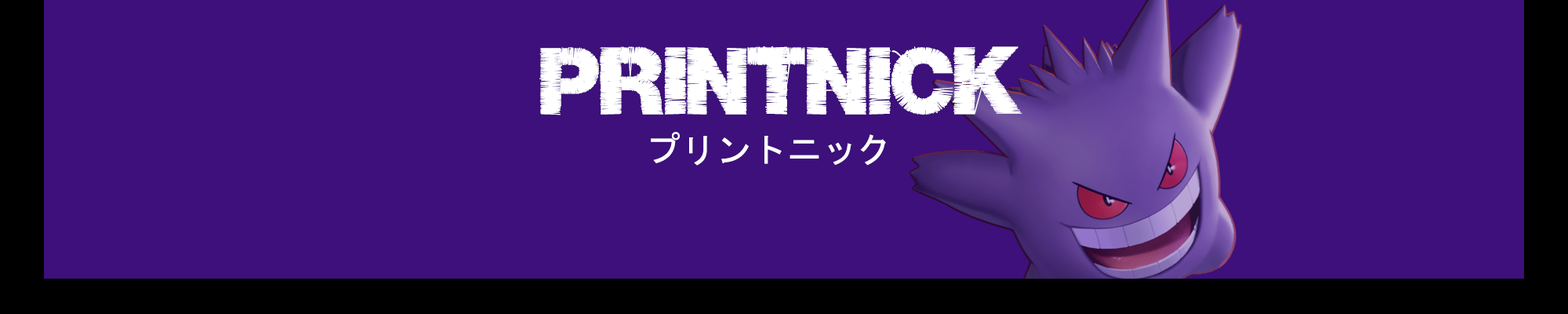
<style>
.page{position:relative;width:1568px;height:314px;background:#3d107b}
.page>*{position:absolute;margin:0}
.t1{font:83.6px "Base05";color:#ffffff}
.t2{font:35.3px "MS-Gothic";color:#ffffff}
</style>
<div class="page">
<p class="t1" style="left:539px;top:46px;width:483px;height:69px">printnick</p>
<p class="t2" style="left:651px;top:132px;width:235px;height:33px">プリントニック</p>
</div>
